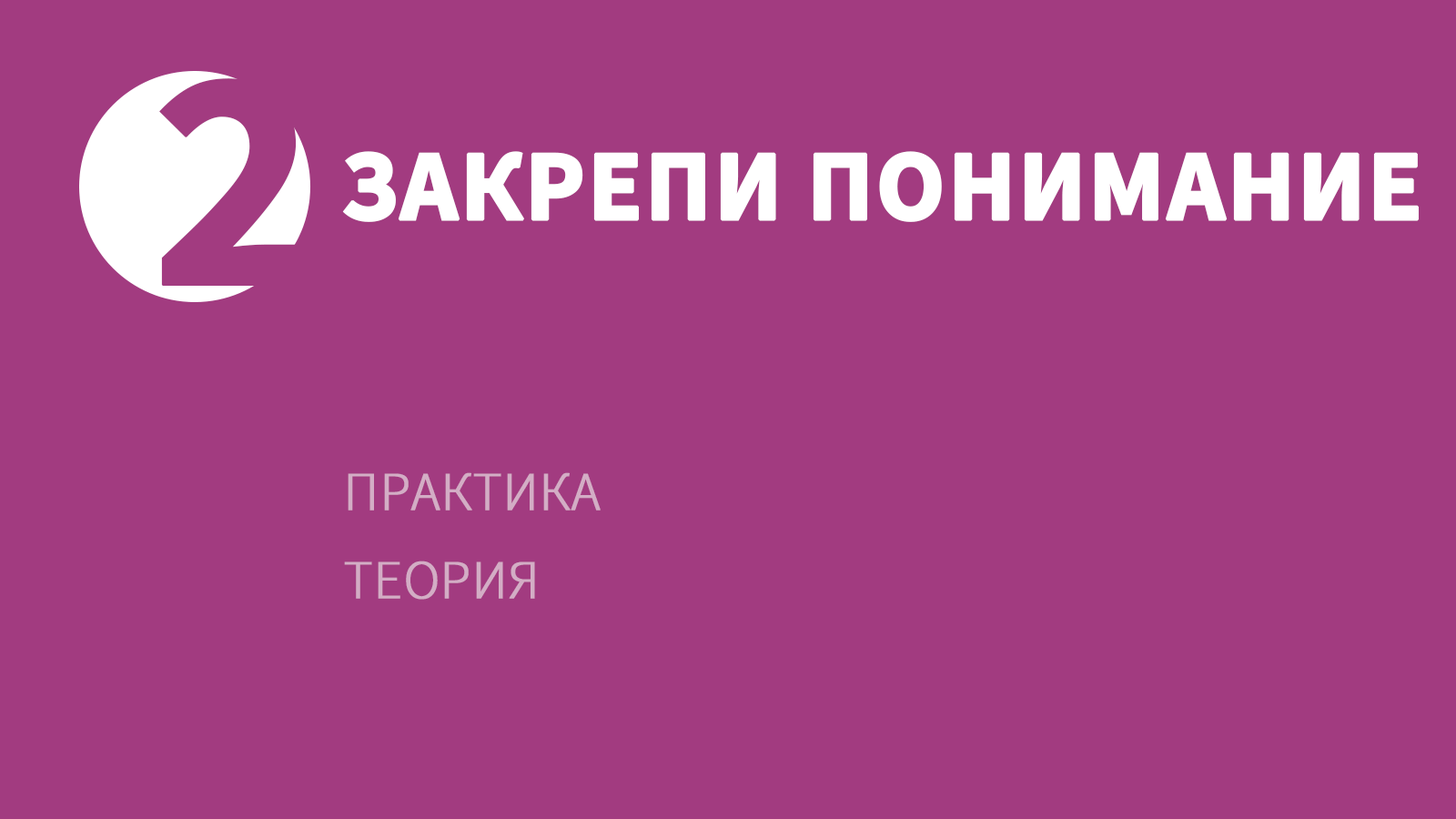
<style>
.page{position:relative;width:1456px;height:819px;background:#a23b80}
.page>*{position:absolute;margin:0}
.t1{font:317.8px "SourceSansPro-Bold";color:#a23b80;text-transform:uppercase;font-weight:bold}
.t2{font:100.1px "SourceSansPro-Bold";color:#ffffff;text-transform:uppercase;font-weight:bold}
.t3{font:54.6px "SourceSansPro-Light";color:#d3adc5;text-transform:uppercase;font-weight:bold}
</style>
<div class="page">
<p class="t1" style="left:159px;top:78px;width:147px;height:208px">2</p>
<p class="t2" style="left:342px;top:151px;width:1077px;height:71px">Закрепи понимание</p>
<p class="t3" style="left:348px;top:472px;width:253px;height:39px">практика</p>
<p class="t3" style="left:344px;top:561px;width:191px;height:39px">теория</p>
</div>
